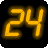
<style>
.page{position:relative;width:48px;height:48px;background:#000000}
.page>*{position:absolute;margin:0}
.t1{font:40px "DAKOTA-Normal";color:#ffb400}
</style>
<div class="page">
<p class="t1" style="left:4px;top:9px;width:40px;height:28px">24</p>
</div>
